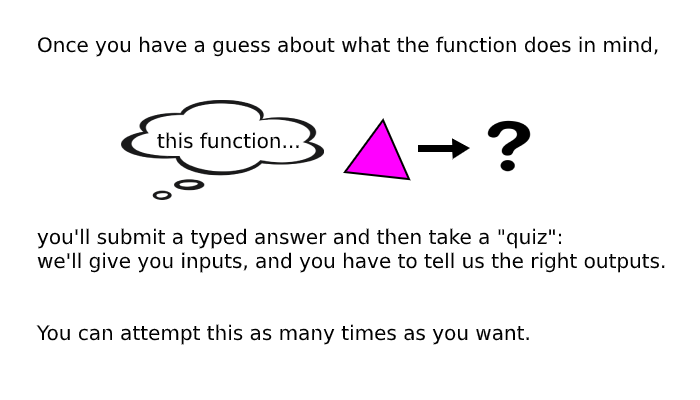
<style>
.page{position:relative;width:700px;height:400px;background:#ffffff}
.page>*{position:absolute;margin:0}
.t1{font:20px "DejaVuSans";color:#000000}
</style>
<div class="page">
<p class="t1" style="left:36px;top:36px;width:629px;height:309px">Once you have a guess about what the function does in mind,<br><br><br>   <br>   this function...<br><br><br><br>you'll submit a typed answer and then take a "quiz": <br>we'll give you inputs, and you have to tell us the right outputs.<br><br><br>You can attempt this as many times as you want.</p>
</div>
